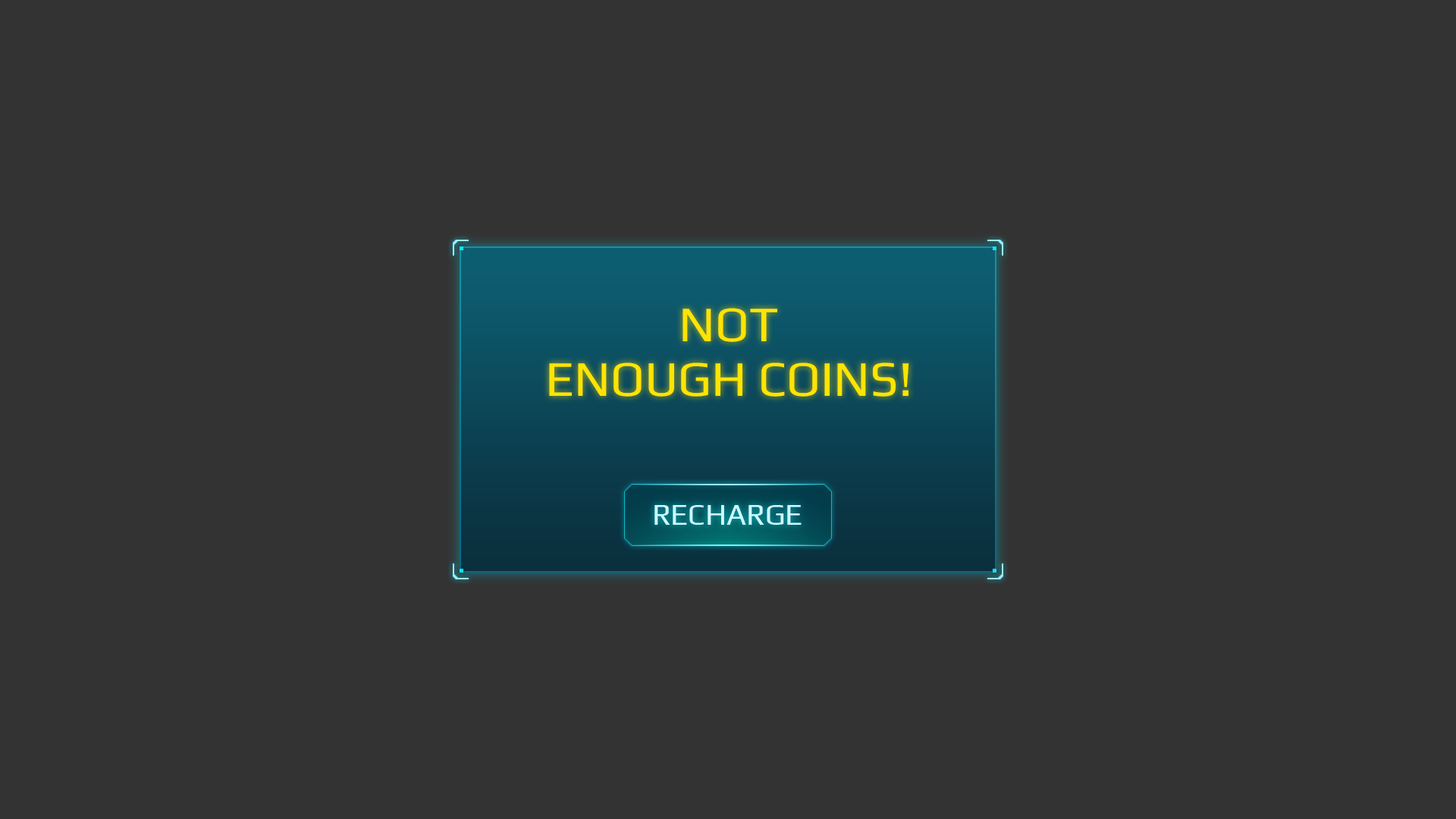
<style>
.page{position:relative;width:1456px;height:819px;background:#333333}
.page>*{position:absolute;margin:0}
.t1{font:50px/54.6px "Play-Regular";color:#ffe400}
.t2{font:30.3px "Play-Regular";color:#cdfbff}
</style>
<div class="page">
<p class="t1" style="left:549px;top:308px;width:360px;height:89px;text-align:center">NOT<br>ENOUGH COINS!</p>
<p class="t2" style="left:654px;top:505px;width:148px;height:20px">RECHARGE</p>
</div>
